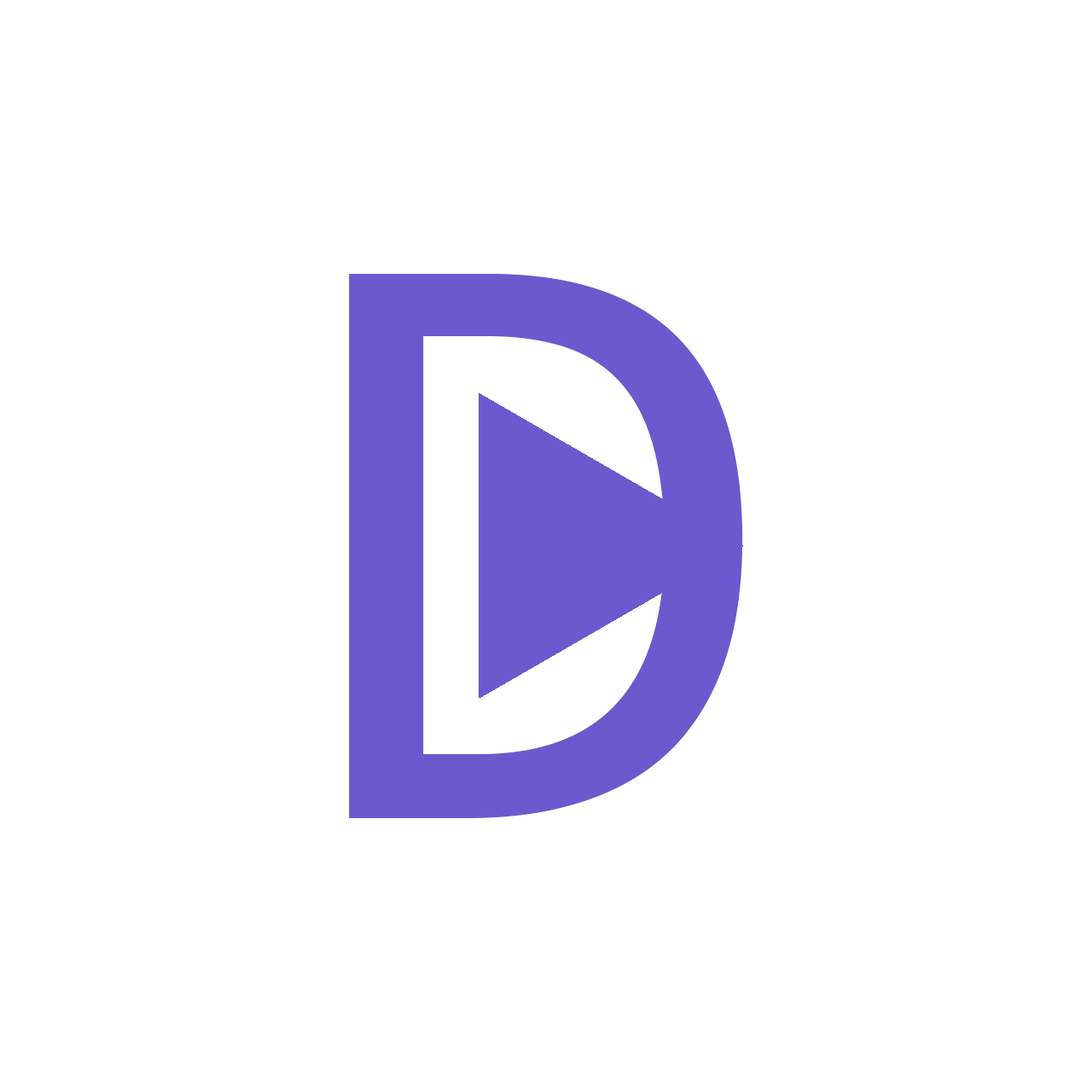
<style>
.page{position:relative;width:1092px;height:1092px;background:#ffffff}
.page>*{position:absolute;margin:0}
.t1{font:853.1px "Consolas";color:#6a5acd}
</style>
<div class="page">
<p class="t1" style="left:349px;top:274px;width:394px;height:544px">D</p>
</div>
